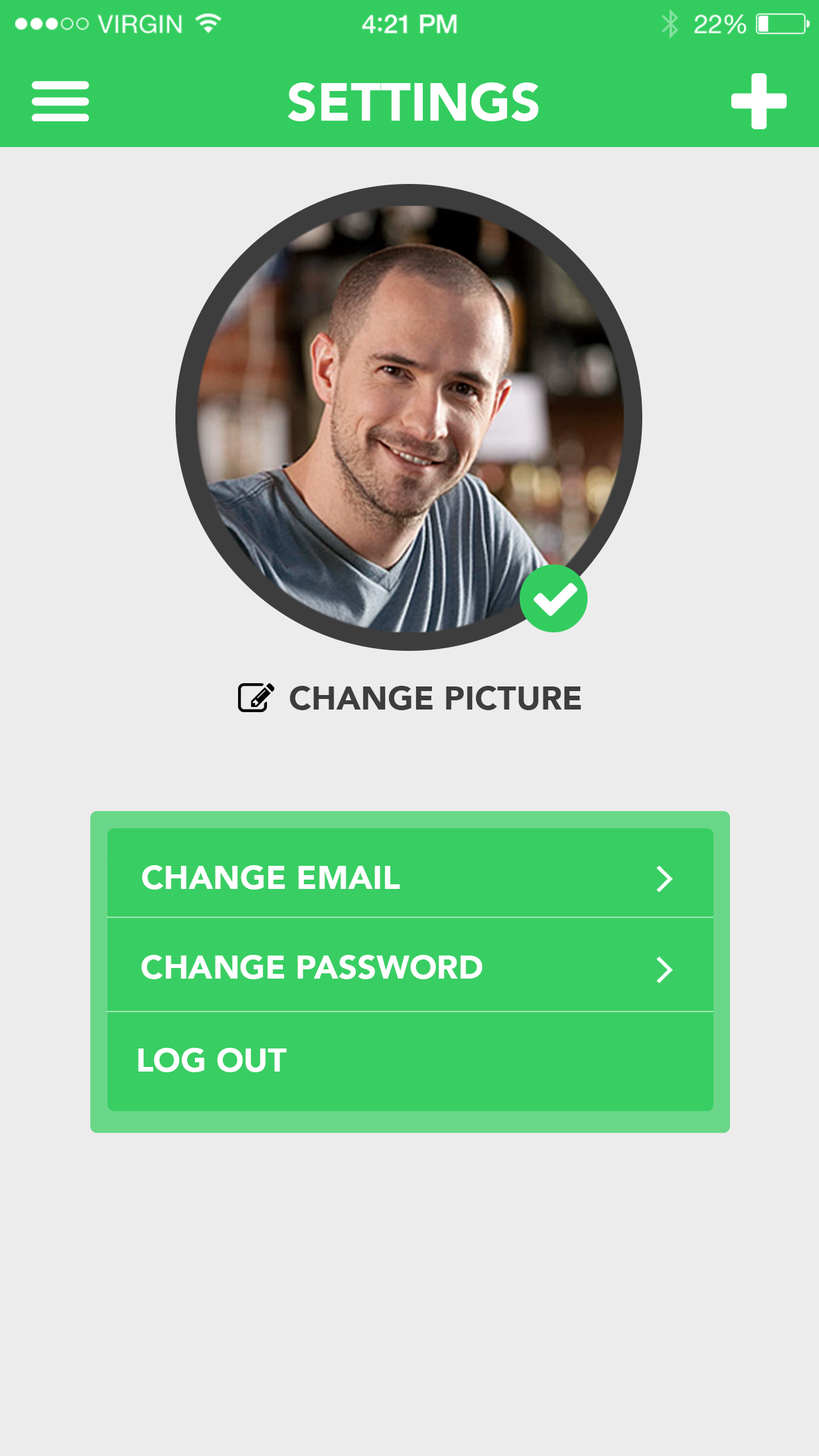
<style>
.page{position:relative;width:819px;height:1456px;background:#ececec}
.page>*{position:absolute;margin:0}
.t1{font:33px "Avenir-Black";color:#3d3d3d}
.t2{font:33px "Avenir-Black";color:#ffffff}
</style>
<div class="page">
<p class="t1" style="left:289px;top:686px;width:292px;height:24px">CHANGE PICTURE</p>
<p class="t2" style="left:142px;top:865px;width:258px;height:25px">CHANGE EMAIL</p>
<p class="t2" style="left:141px;top:955px;width:342px;height:24px">CHANGE PASSWORD</p>
<p class="t2" style="left:138px;top:1048px;width:149px;height:24px">LOG OUT</p>
</div>
